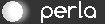
<style>
.page{position:relative;width:105px;height:24px;background:#333333}
.page>*{position:absolute;margin:0}
.t1{font:24px "Comfortaa-Bold";color:#fcfcfc}
</style>
<div class="page">
<p class="t1" style="left:41px;top:1px;width:55px;height:22px">perla</p>
</div>
